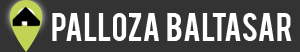
<style>
.page{position:relative;width:300px;height:52px;background:#333333}
.page>*{position:absolute;margin:0}
.t1{font:31px "Bebas";color:#ffffff}
</style>
<div class="page">
<p class="t1" style="left:52px;top:13px;width:240px;height:28px">PALLOZA  BALTASAR</p>
</div>
